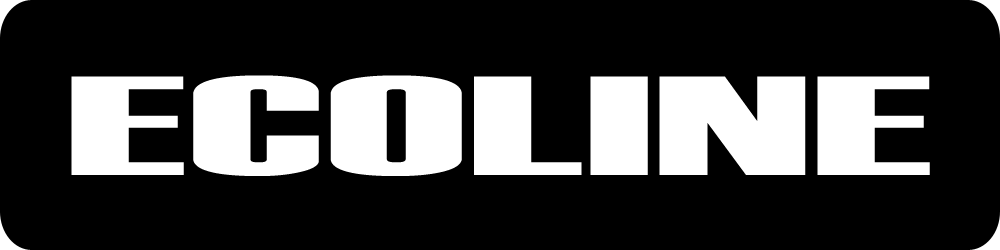
<style>
.page{position:relative;width:1000px;height:250px;background:#000000}
.page>*{position:absolute;margin:0}
.t1{font:140.7px "Haettenschweiler";color:#ffffff;scale:2.65 1}
</style>
<div class="page">
<p class="t1" style="left:71px;top:75px;width:859px;height:101px">ECOLINE</p>
</div>
